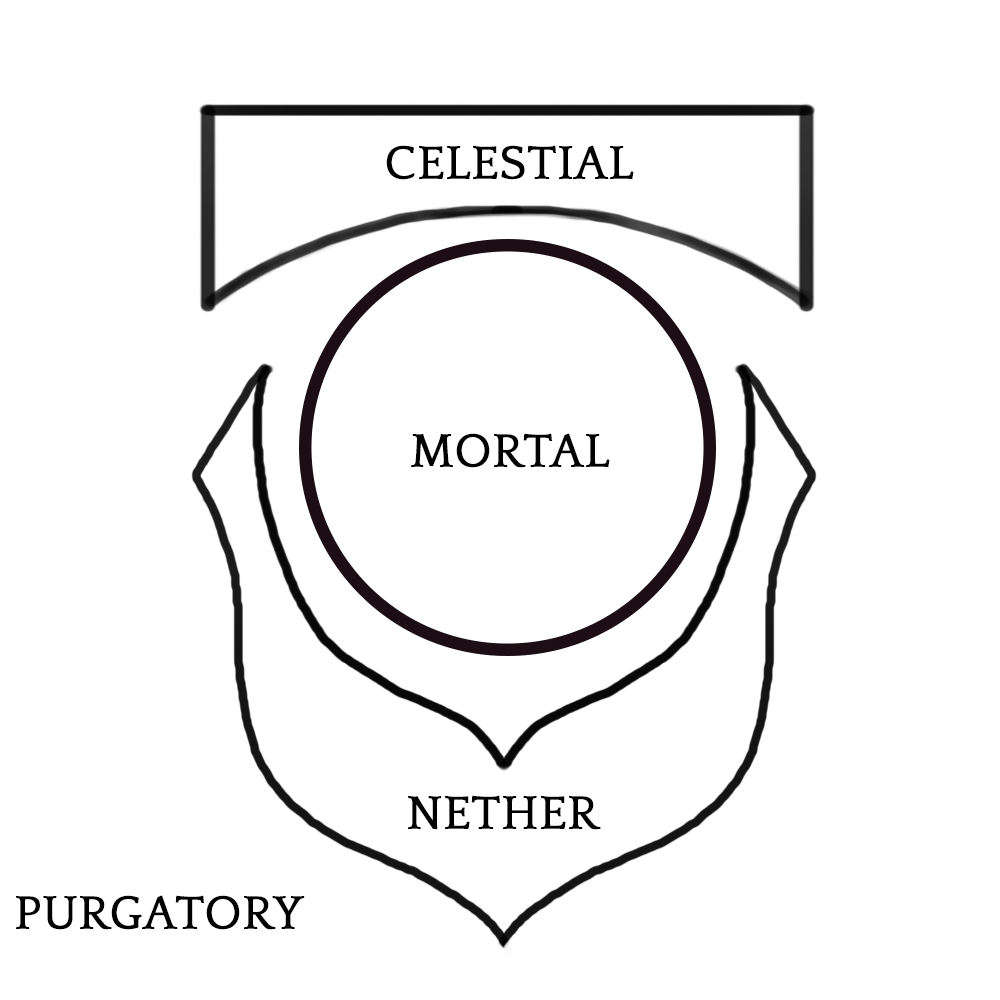
<style>
.page{position:relative;width:1000px;height:1000px;background:#ffffff}
.page>*{position:absolute;margin:0}
.t1{font:48px "QuattrocentoRoman";color:#000000;font-weight:bold}
</style>
<div class="page">
<p class="t1" style="left:386px;top:145px;width:248px;height:35px">CELESTIAL</p>
<p class="t1" style="left:411px;top:433px;width:199px;height:35px">MORTAL</p>
<p class="t1" style="left:408px;top:795px;width:193px;height:35px">NETHER</p>
<p class="t1" style="left:16px;top:895px;width:289px;height:35px">PURGATORY</p>
</div>
